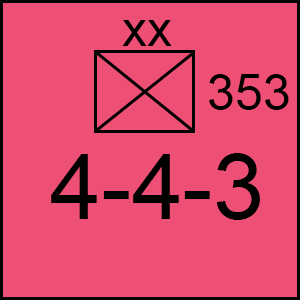
<style>
.page{position:relative;width:300px;height:300px;background:#ee4f74}
.page>*{position:absolute;margin:0}
.t1{font:50px "ArialMT";color:#000000}
.t2{font:91.7px "ArialMT";color:#000000}
</style>
<div class="page">
<p class="t1" style="left:122px;top:20px;width:50px;height:26px">xx</p>
<p class="t1" style="left:209px;top:74px;width:80px;height:36px">353</p>
<p class="t2" style="left:51px;top:153px;width:209px;height:67px">4-4-3</p>
</div>
